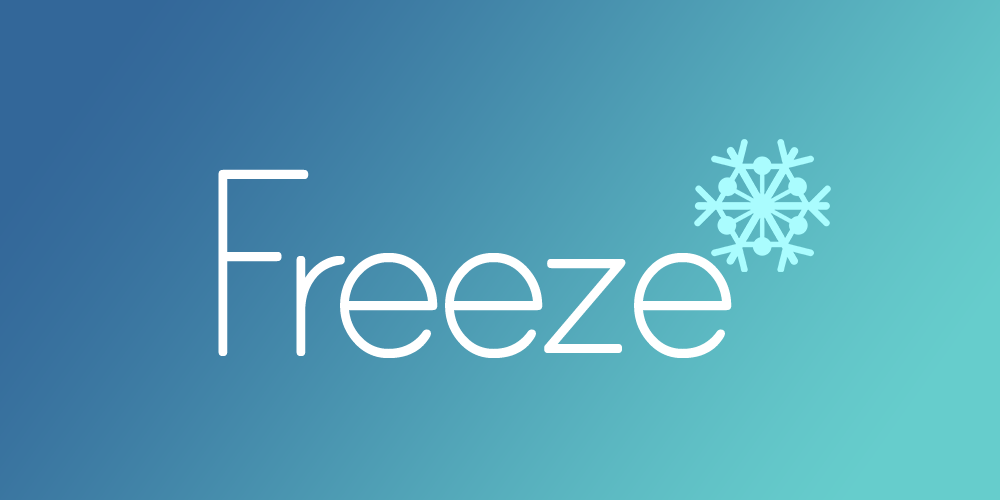
<style>
.page{position:relative;width:1000px;height:500px}
.page>*{position:absolute;margin:0}
.t1{font:300px "PrintClearly";letter-spacing:-0.1em;color:#ffffff}
</style>
<div class="page">
<p class="t1" style="left:218px;top:169px;width:514px;height:189px">Freeze</p>
</div>
